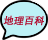
<style>
.page{position:relative;width:48px;height:40px;background:#bdf1f6}
.page>*{position:absolute;margin:0}
.t1{font:10px "SimHei";color:#b0062a;font-weight:bold;font-style:italic}
</style>
<div class="page">
<p class="t1" style="left:3px;top:15px;width:41px;height:11px">地理百科</p>
</div>
